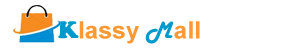
<style>
.page{position:relative;width:300px;height:50px;background:#ffffff}
.page>*{position:absolute;margin:0}
.t1{font:24.8px "CooperBlack";color:#0099cc}
.t2{font:24px "Arial-BoldMT";color:#ff9933}
.t3{font:24.8px "HarlowSolid";color:#0099cc}
</style>
<div class="page">
<p class="t1" style="left:58px;top:21px;width:21px;height:18px">K</p>
<p class="t2" style="left:79px;top:21px;width:121px;height:23px">lassy     all</p>
<p class="t3" style="left:145px;top:21px;width:29px;height:23px">M</p>
</div>
